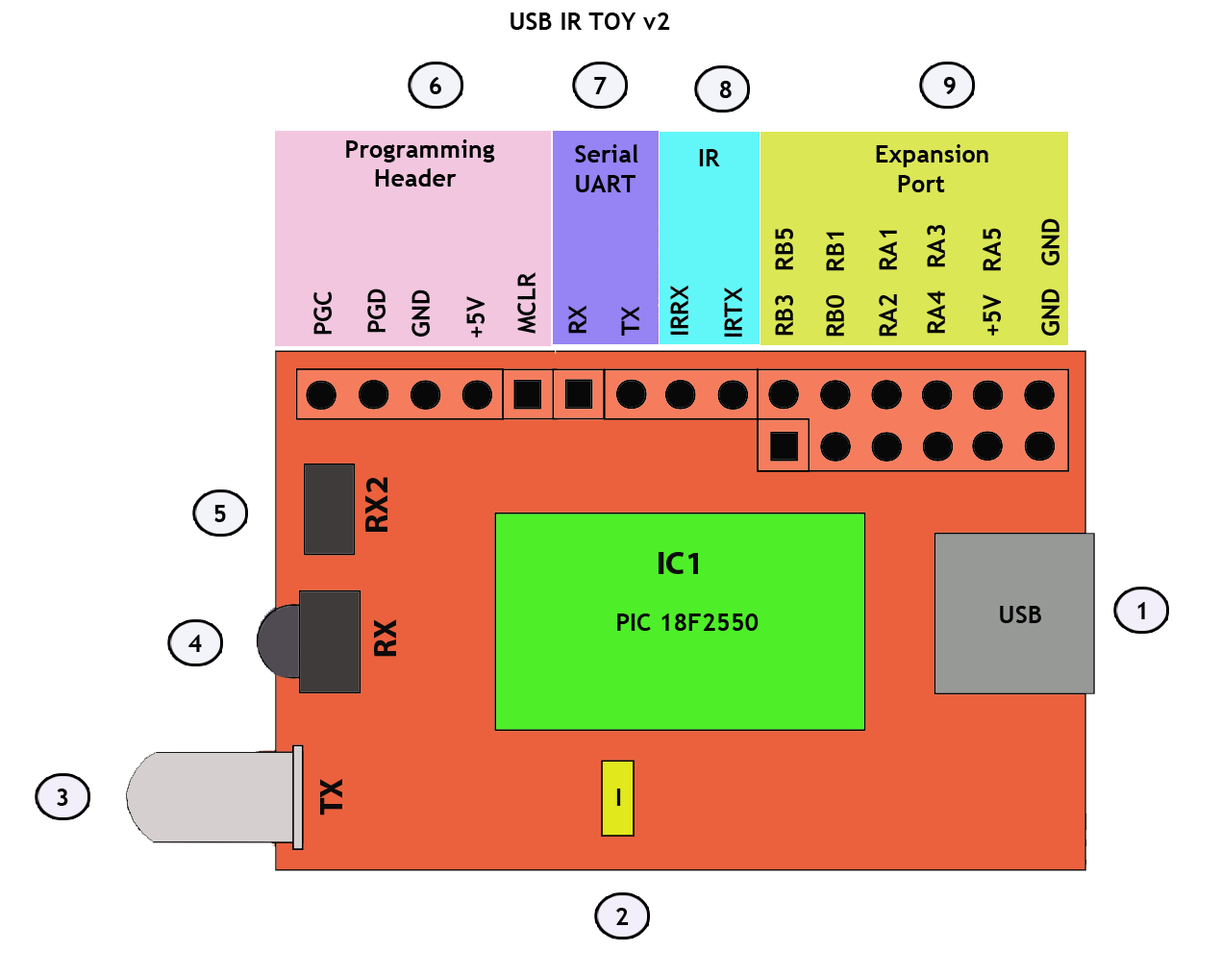
<style>
.page{position:relative;width:1221px;height:977px;background:#ffffff}
.page>*{position:absolute;margin:0}
.t1{font:24.4px "TrebuchetMS-Bold";color:#030303}
.t2{font:24.4px "TrebuchetMS-Bold";color:#050505}
.t3{font:32.6px "MyriadPro-Bold";color:#0b0b0b}
</style>
<div class="page">
<p class="t1" style="left:510px;top:12px;width:160px;height:18px">USB IR TOY v2</p>
<p class="t2" style="left:430px;top:77px;width:11px;height:17px">6</p>
<p class="t2" style="left:594px;top:77px;width:13px;height:17px">7</p>
<p class="t2" style="left:720px;top:81px;width:12px;height:17px">8</p>
<p class="t1" style="left:346px;top:139px;width:149px;height:47px">Programming<br>    Header</p>
<p class="t1" style="left:575px;top:144px;width:63px;height:48px">Serial<br>UART</p>
<p class="t1" style="left:699px;top:149px;width:21px;height:17px">IR</p>
<p class="t1" style="left:876px;top:144px;width:112px;height:48px">Expansion<br>   Port</p>
<p class="t2" style="left:1041px;top:218px;width:18px;height:118px;rotate:-90deg">GND   GND</p>
<p class="t2" style="left:775px;top:228px;width:18px;height:108px;rotate:-90deg">RB3   RB5</p>
<p class="t2" style="left:826px;top:232px;width:18px;height:104px;rotate:-90deg">RB0   RB1</p>
<p class="t2" style="left:879px;top:230px;width:18px;height:106px;rotate:-90deg">RA2   RA1</p>
<p class="t2" style="left:927px;top:225px;width:18px;height:109px;rotate:-90deg">RA4   RA3</p>
<p class="t2" style="left:982px;top:228px;width:19px;height:108px;rotate:-90deg">+5V   RA5</p>
<p class="t2" style="left:517px;top:272px;width:18px;height:62px;rotate:-90deg">MCLR</p>
<p class="t2" style="left:313px;top:291px;width:19px;height:44px;rotate:-90deg">PGC</p>
<p class="t2" style="left:367px;top:288px;width:18px;height:45px;rotate:-90deg">PGD</p>
<p class="t2" style="left:411px;top:289px;width:19px;height:47px;rotate:-90deg">GND</p>
<p class="t2" style="left:670px;top:285px;width:18px;height:50px;rotate:-90deg">IRRX</p>
<p class="t2" style="left:724px;top:286px;width:18px;height:50px;rotate:-90deg">IRTX</p>
<p class="t2" style="left:466px;top:296px;width:19px;height:41px;rotate:-90deg">+5V</p>
<p class="t2" style="left:568px;top:305px;width:18px;height:29px;rotate:-90deg">RX</p>
<p class="t2" style="left:621px;top:306px;width:18px;height:30px;rotate:-90deg">TX</p>
<p class="t3" style="left:365px;top:477px;width:22px;height:55px;rotate:-90deg">RX2</p>
<p class="t2" style="left:214px;top:505px;width:12px;height:17px">5</p>
<p class="t3" style="left:659px;top:552px;width:39px;height:22px">IC1</p>
<p class="t2" style="left:1000px;top:606px;width:41px;height:17px">USB</p>
<p class="t2" style="left:1137px;top:602px;width:8px;height:17px">1</p>
<p class="t2" style="left:617px;top:613px;width:141px;height:18px">PIC 18F2550</p>
<p class="t3" style="left:374px;top:619px;width:22px;height:38px;rotate:-90deg">RX</p>
<p class="t2" style="left:188px;top:634px;width:14px;height:18px">4</p>
<p class="t3" style="left:320px;top:779px;width:22px;height:36px;rotate:-90deg">TX</p>
<p class="t2" style="left:57px;top:788px;width:11px;height:18px">3</p>
<p class="t2" style="left:616px;top:788px;width:5px;height:18px">I</p>
<p class="t2" style="left:616px;top:907px;width:13px;height:18px">2</p>
</div>
